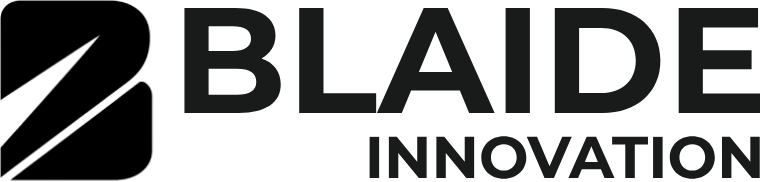
<style>
.page{position:relative;width:760px;height:182px;background:#ffffff}
.page>*{position:absolute;margin:0}
.t1{font:150px "Montserrat-Bold";color:#191b1a}
.t2{font:58.8px "Montserrat-Bold";color:#191b1a}
</style>
<div class="page">
<p class="t1" style="left:184px;top:8px;width:576px;height:105px">BLAIDE</p>
<p class="t2" style="left:369px;top:136px;width:391px;height:43px">INNOVATION</p>
</div>
